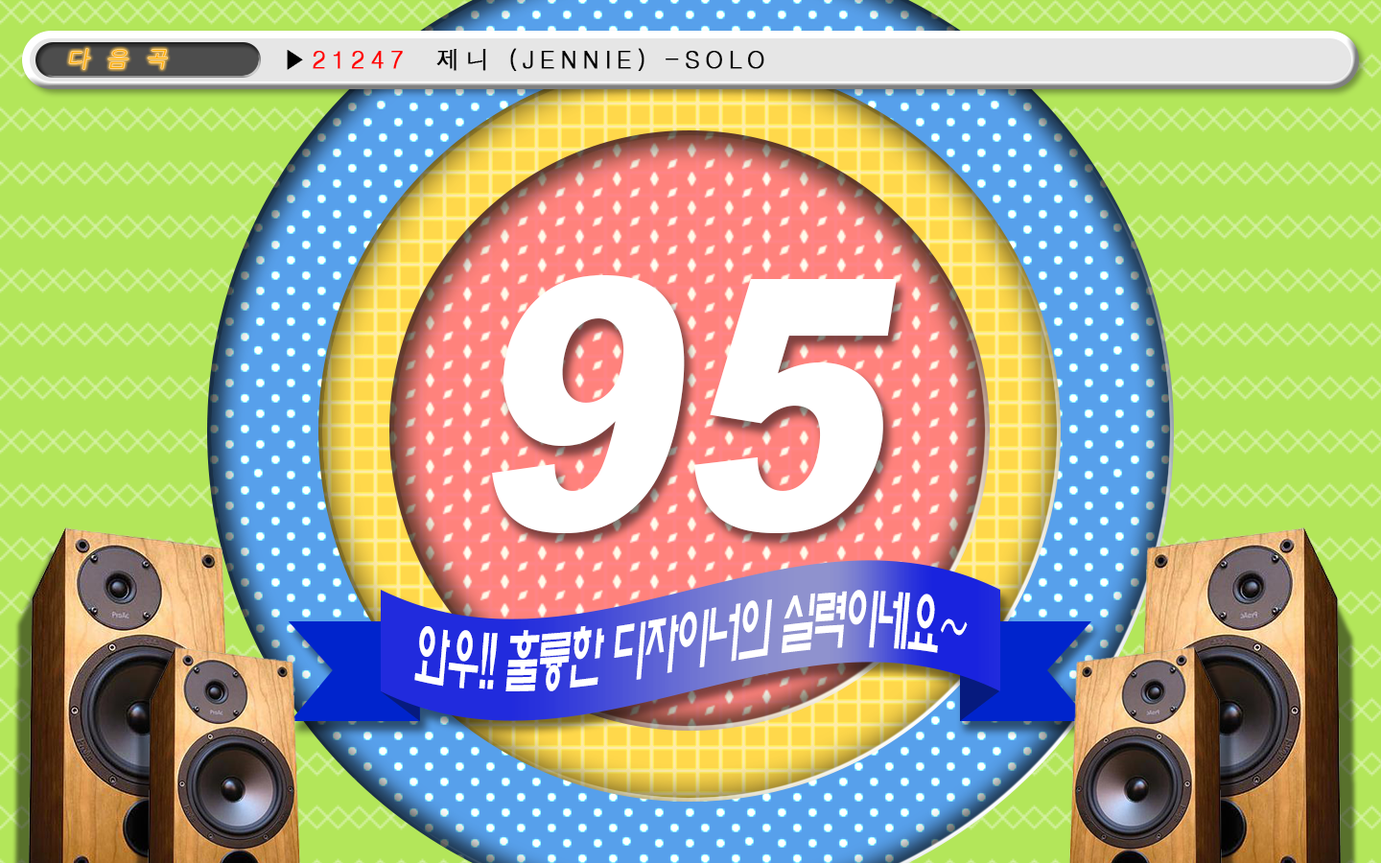
<style>
.page{position:relative;width:1381px;height:863px}
.page>*{position:absolute;margin:0}
.t1{font:22.7px "Dotum";letter-spacing:0.2em;color:#ffae00;font-style:italic}
.t2{font:24px "Dotum";letter-spacing:0.2em;color:#000000;font-weight:bold}
.t3{font:24px "Dotum";letter-spacing:0.2em;color:#ff0000;font-weight:bold}
.t4{font:349px "Arial-Black";color:#ffffff;font-style:italic;scale:0.88 1}
.t5{font:68.8px "ExpoM-HM";letter-spacing:-0.06em;color:#ffffff;font-style:italic;scale:0.49 1}
</style>
<div class="page">
<p class="t1" style="left:69px;top:49px;width:99px;height:20px">다 음 곡</p>
<p class="t2" style="left:287px;top:48px;width:477px;height:24px">▶<span class="t3">21247</span>  제니 (JENNIE) -SOLO</p>
<p class="t4" style="left:492px;top:275px;width:405px;height:258px">95</p>
<p class="t5" style="left:414px;top:590px;width:554px;height:102px">와우!! 훌륭한 디자이너의 실력이네요~</p>
</div>
